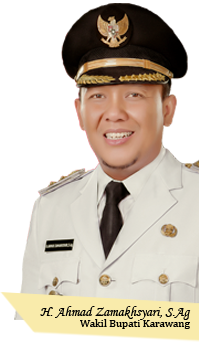
<style>
.page{position:relative;width:199px;height:354px;background:#ffffff}
.page>*{position:absolute;margin:0}
.t1{font:14px "MonotypeCorsiva";color:#000000}
.t2{font:11px "CambriaMath";color:#000000}
</style>
<div class="page">
<p class="t1" style="left:40px;top:306px;width:151px;height:14px">H. Ahmad Zamakhsyari, S.Ag</p>
<p class="t2" style="left:80px;top:319px;width:110px;height:10px">Wakil Bupati Karawang</p>
</div>
